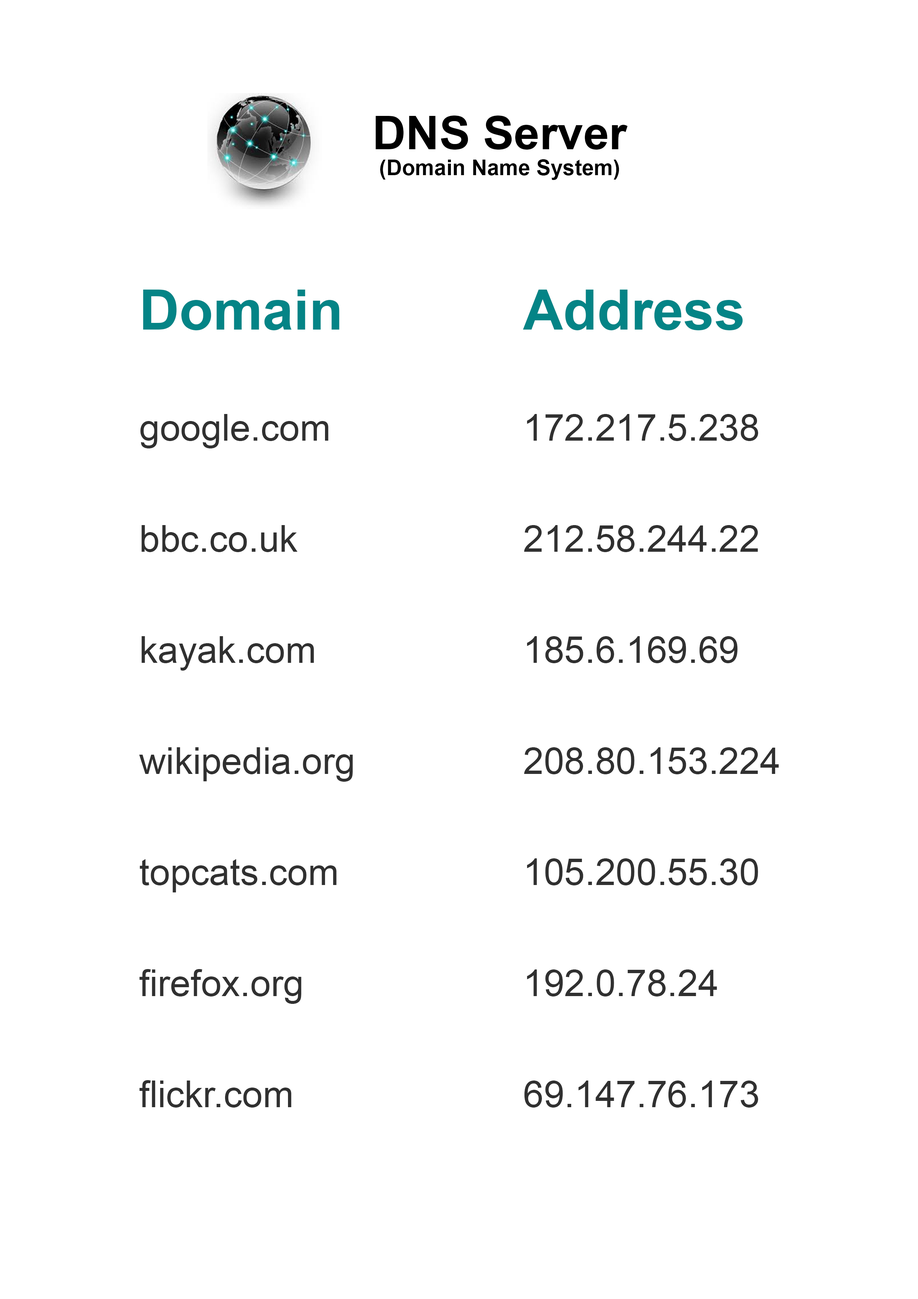
<style>
.page{position:relative;width:918px;height:1299px;background:#ffffff}
.page>*{position:absolute;margin:0}
.t1{font:21.6px "Arial-BoldMT";color:#000000}
.t2{font:46.3px "Arial-BoldMT";color:#000000}
.t3{font:37px/111.1px "ArialMT";color:#303030}
.t4{font:55.5px "Arial-BoldMT";color:#048486}
</style>
<div class="page">
<p class="t1" style="left:376px;top:116px;width:252px;height:64px;text-align:center"><span class="t2">DNS Server<br></span>(Domain Name System)</p>
<p class="t3" style="left:139px;top:290px;width:214px;height:817px"><span class="t4">Domain<br></span>google.com<br>bbc.co.uk<br>kayak.com<br>wikipedia.org<br>topcats.com<br>firefox.org<br>flickr.com</p>
<p class="t3" style="left:523px;top:290px;width:256px;height:817px"><span class="t4">Address<br></span>172.217.5.238<br>212.58.244.22<br>185.6.169.69<br>208.80.153.224<br>105.200.55.30<br>192.0.78.24<br>69.147.76.173</p>
</div>
